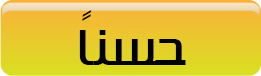
<style>
.page{position:relative;width:261px;height:76px}
.page>*{position:absolute;margin:0}
.t1{font:50px "HacenSaudiArabia";color:#000000}
</style>
<div class="page">
<p class="t1" style="left:79px;top:10px;width:107px;height:55px">حسناً</p>
</div>
